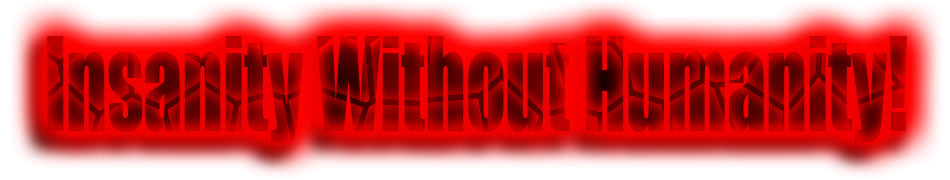
<style>
.page{position:relative;width:950px;height:180px}
.page>*{position:absolute;margin:0}
.t1{font:120.3px "Impact";scale:0.65 1}
</style>
<div class="page">
<p class="t1" style="left:47px;top:36px;width:860px;height:106px">Insanity Without Humanity!</p>
</div>
